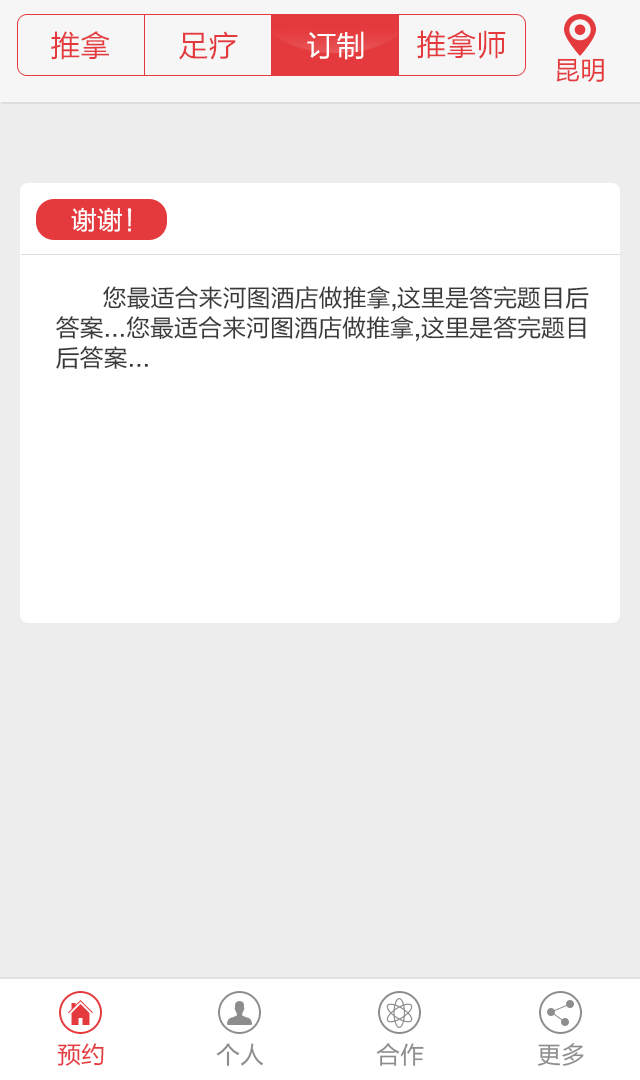
<style>
.page{position:relative;width:640px;height:1080px;background:#ffffff}
.page>*{position:absolute;margin:0}
.t1{font:30px "FZLTHJW--GB1-0";color:#e43a3d}
.t2{font:30px "FZLTHJW--GB1-0";color:#ffffff}
.t3{font:26px "FZLTHJW--GB1-0";color:#e43a3d}
.t4{font:26px "FZLTHJW--GB1-0";color:#ffffff}
.t5{font:24px/30px "FZLTHJW--GB1-0";color:#393939}
.t6{font:24px "FZLTHJW--GB1-0";color:#e43a3d}
.t7{font:24px "FZLTHJW--GB1-0";color:#8d8d8d}
</style>
<div class="page">
<p class="t1" style="left:417px;top:30px;width:89px;height:29px">推拿师</p>
<p class="t1" style="left:51px;top:31px;width:59px;height:29px">推拿</p>
<p class="t1" style="left:179px;top:31px;width:59px;height:29px">足疗</p>
<p class="t2" style="left:307px;top:31px;width:57px;height:29px">订制</p>
<p class="t3" style="left:556px;top:58px;width:48px;height:24px">昆明</p>
<p class="t4" style="left:71px;top:207px;width:61px;height:25px">谢谢！</p>
<p class="t5" style="left:56px;top:286px;width:533px;height:83px">您最适合来河图酒店做推拿,这里是答完题目后答案...您最适合来河图酒店做推拿,这里是答完题目<br>后答案...</p>
<p class="t6" style="left:57px;top:1043px;width:47px;height:23px">预约</p>
<p class="t7" style="left:216px;top:1043px;width:47px;height:23px">个人</p>
<p class="t7" style="left:376px;top:1043px;width:48px;height:23px">合作</p>
<p class="t7" style="left:538px;top:1043px;width:46px;height:23px">更多</p>
</div>
